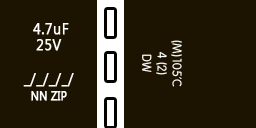
<style>
.page{position:relative;width:256px;height:128px;background:#1c1401}
.page>*{position:absolute;margin:0}
.t1{font:15.7px/16.7px "SegoeUI";letter-spacing:0.02em;color:#ffffff;font-weight:bold;scale:0.89 1}
.t2{font:11.8px/16.7px "SegoeUI";letter-spacing:0.02em;color:#ffffff;font-weight:bold;scale:0.89 1}
.t3{font:12.5px "Vagabond";color:#ffffff}
</style>
<div class="page">
<p class="t1" style="left:23px;top:23px;width:51px;height:78px;text-align:center">4.7uF<br>25V<br><br>_/_/_/_/<br><span class="t2">NN ZIP</span></p>
<p class="t3" style="left:142px;top:40px;width:40px;height:47px;text-align:center;rotate:90deg">(M)105’C<br>4 (2)<br>DW</p>
</div>
